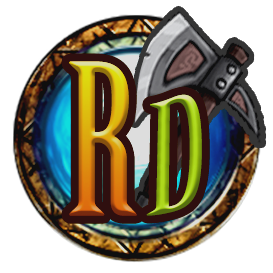
<style>
.page{position:relative;width:273px;height:273px;background:#ffffff}
.page>*{position:absolute;margin:0}
.t1{font:205.5px "BirchStd";letter-spacing:0.05em}
.t2{font:154.1px "BirchStd";letter-spacing:0.05em;scale:1.28 1}
</style>
<div class="page">
<p class="t1" style="left:69px;top:61px;width:68px;height:155px">R</p>
<p class="t2" style="left:146px;top:94px;width:56px;height:122px">D</p>
</div>
